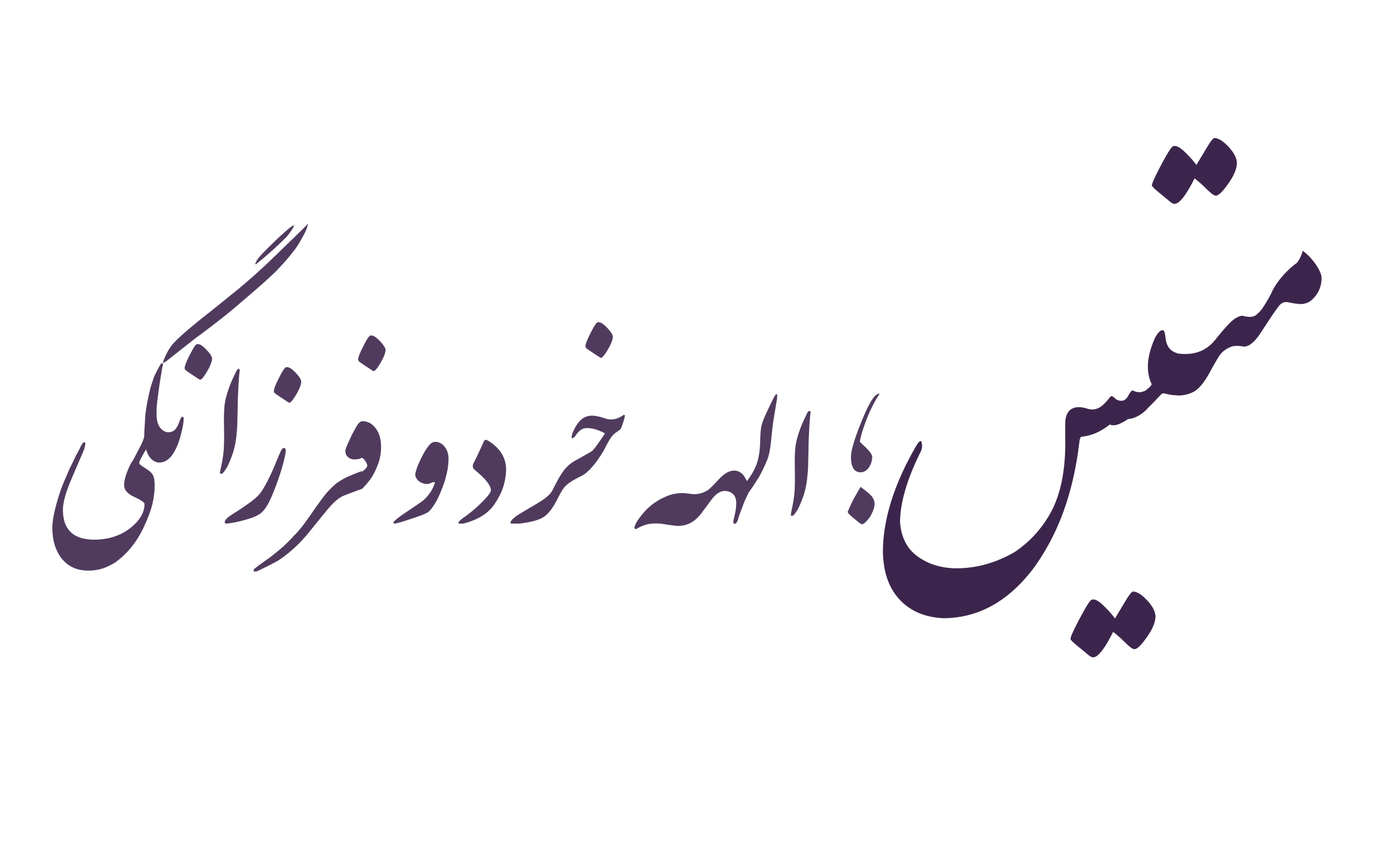
<style>
.page{position:relative;width:1381px;height:863px;background:#ffffff}
.page>*{position:absolute;margin:0}
.t1{font:479.6px "IranNastaliq";color:#3c254c}
.t2{font:287.8px "IranNastaliq";color:#503b5e}
</style>
<div class="page">
<p class="t1" style="left:883px;top:138px;width:439px;height:520px">متیس</p>
<p class="t2" style="left:52px;top:224px;width:828px;height:348px">؛الهه خرد و فرزانگی</p>
</div>
